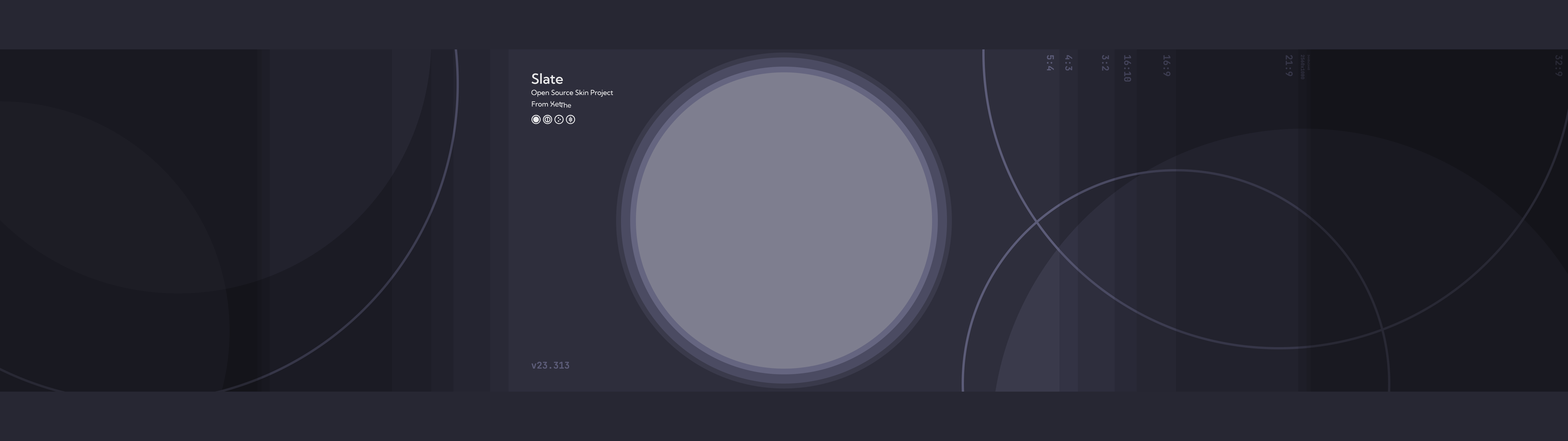
<style>
.page{position:relative;width:1568px;height:441px;background:#272733}
.page>*{position:absolute;margin:0}
.t1{font:9.2px "JetBrainsMono-Bold";color:#5c5c78}
.t2{font:9.2px "JetBrainsMono-Bold";color:#52526c}
.t3{font:9.2px "JetBrainsMono-Bold";color:#4a4a62}
.t4{font:9.2px "JetBrainsMono-Bold";color:#424258}
.t5{font:9.2px "JetBrainsMono-Bold";color:#3c3c50}
.t6{font:9.2px "JetBrainsMono-Bold";color:#363648}
.t7{font:4.6px "JetBrainsMono-Bold";color:#303040}
.t8{font:2.9px "JetBrainsMono-Bold";color:#2c2c3a}
.t9{font:9.2px "JetBrainsMono-Bold";color:#282834}
.t10{font:13.8px "KumbhSans-Medium";color:#ffffff}
.t11{font:6.9px "KumbhSans-Regular";color:#ffffff}
</style>
<div class="page">
<p class="t1" style="left:1047px;top:55px;width:7px;height:15px;rotate:90deg">5:4</p>
<p class="t2" style="left:1065px;top:55px;width:7px;height:16px;rotate:90deg">4:3</p>
<p class="t3" style="left:1102px;top:55px;width:7px;height:16px;rotate:90deg">3:2</p>
<p class="t4" style="left:1124px;top:55px;width:7px;height:26px;rotate:90deg">16:10</p>
<p class="t5" style="left:1163px;top:55px;width:8px;height:21px;rotate:90deg">16:9</p>
<p class="t6" style="left:1286px;top:55px;width:7px;height:21px;rotate:90deg">21:9</p>
<p class="t7" style="left:1301px;top:55px;width:4px;height:24px;rotate:90deg">2560x1080</p>
<p class="t8" style="left:1307px;top:55px;width:3px;height:15px;rotate:90deg">3440x1440</p>
<p class="t9" style="left:1555px;top:55px;width:8px;height:21px;rotate:90deg">32:9</p>
<p class="t10" style="left:531px;top:73px;width:32px;height:11px">Slate</p>
<p class="t11" style="left:531px;top:90px;width:82px;height:7px">Open Source Skin Project</p>
<p class="t11" style="left:532px;top:101px;width:16px;height:6px">From</p>
<p class="t1" style="left:531px;top:361px;width:38px;height:7px">v23.313</p>
</div>
